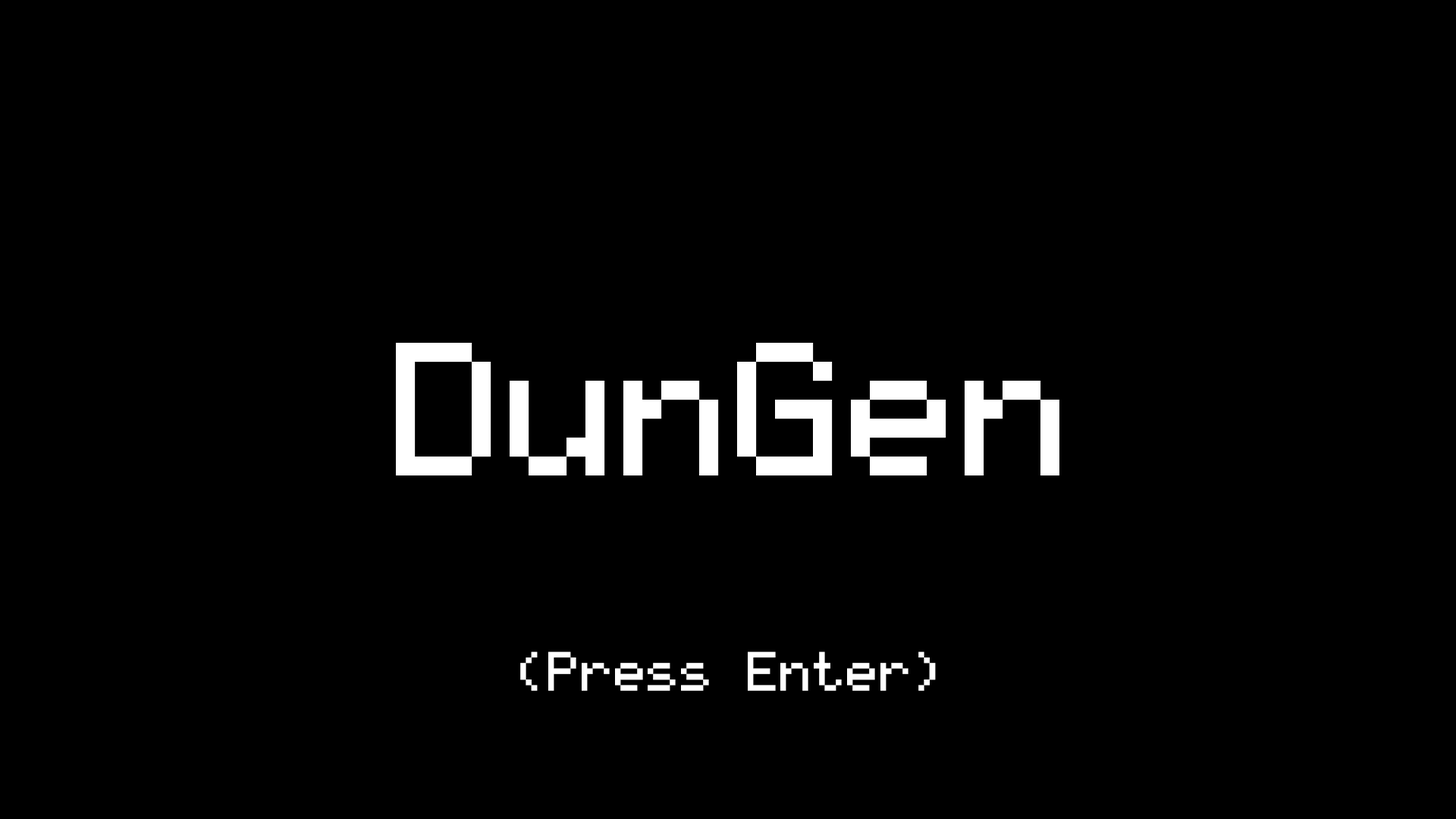
<style>
.page{position:relative;width:1456px;height:819px;background:#000000}
.page>*{position:absolute;margin:0}
.t1{font:151.7px "TI-83-Plus-Large";color:#ffffff}
.t2{font:44.2px "TI-83-Plus-Large";color:#ffffff}
</style>
<div class="page">
<p class="t1" style="left:396px;top:343px;width:663px;height:132px">DunGen</p>
<p class="t2" style="left:520px;top:651px;width:416px;height:40px">(Press Enter)</p>
</div>
